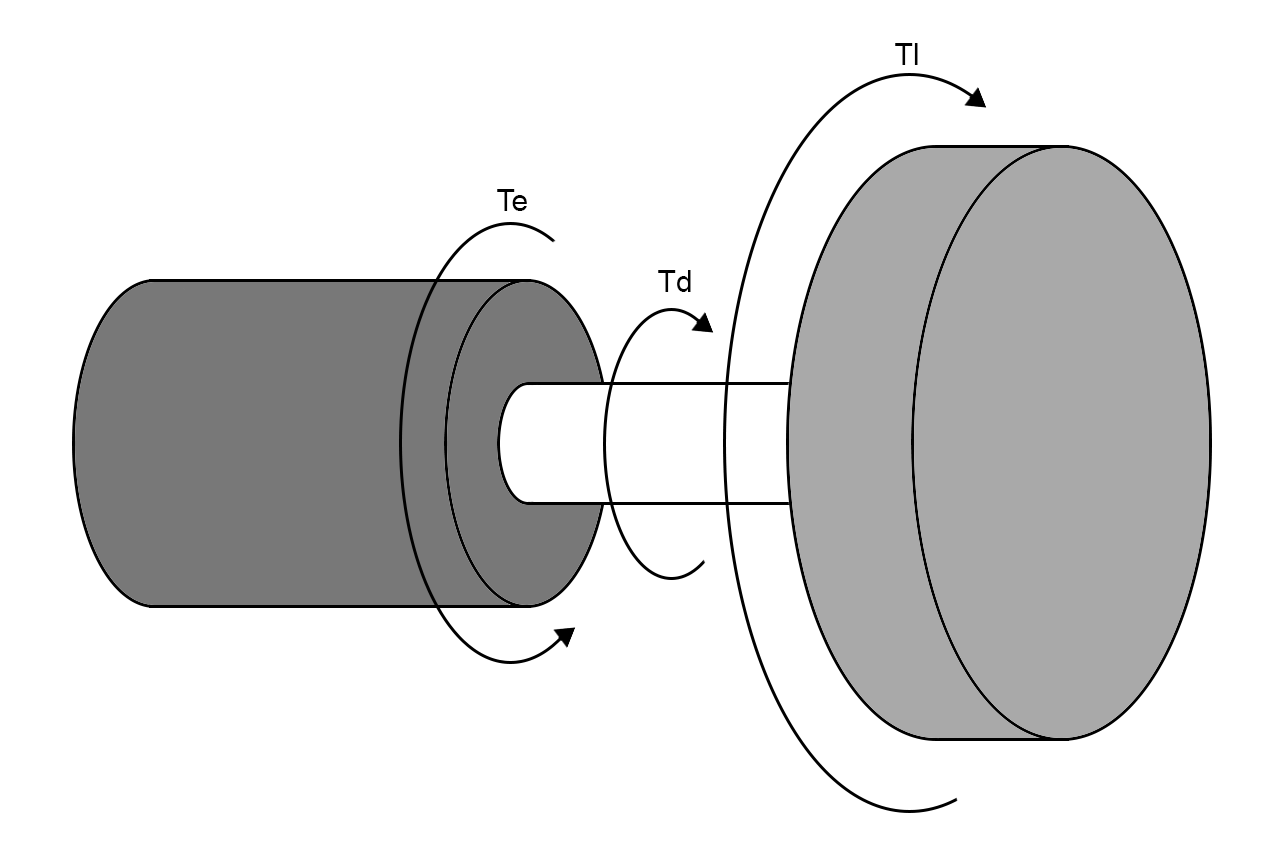
<style>
.page{position:relative;width:1280px;height:862px;background:#ffffff}
.page>*{position:absolute;margin:0}
.t1{font:30px "ArialMT";color:#000000}
</style>
<div class="page">
<p class="t1" style="left:895px;top:43px;width:23px;height:22px">Tl</p>
<p class="t1" style="left:497px;top:189px;width:30px;height:22px">Te</p>
<p class="t1" style="left:658px;top:270px;width:33px;height:22px">Td</p>
</div>
